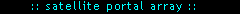
<style>
.page{position:relative;width:240px;height:14px;background:#000000}
.page>*{position:absolute;margin:0}
.t1{font:12px "TrebuchetMS";letter-spacing:0.091em;color:#00ffff}
.t2{font:12px "TrebuchetMS";letter-spacing:0.071em;color:#00ffff}
.t3{font:12px "TrebuchetMS";letter-spacing:0.151em;color:#00ffff}
.t4{font:12px "TrebuchetMS";letter-spacing:0.191em;color:#00ffff}
.t5{font:12px "TrebuchetMS";letter-spacing:-0.029em;color:#00ffff}
.t6{font:12px "TrebuchetMS";letter-spacing:0.08em;color:#00ffff}
</style>
<div class="page">
<p class="t1" style="left:32px;top:1px;width:166px;height:11px">::    <span class="t2">sat</span>e<span class="t3">l</span><span class="t4">l</span>i<span class="t2">t</span>e p<span class="t5">o</span>rtal  array ::</p>
<p class="t6" style="left:151px;top:4px;width:44px;height:8px">array ::</p>
</div>
